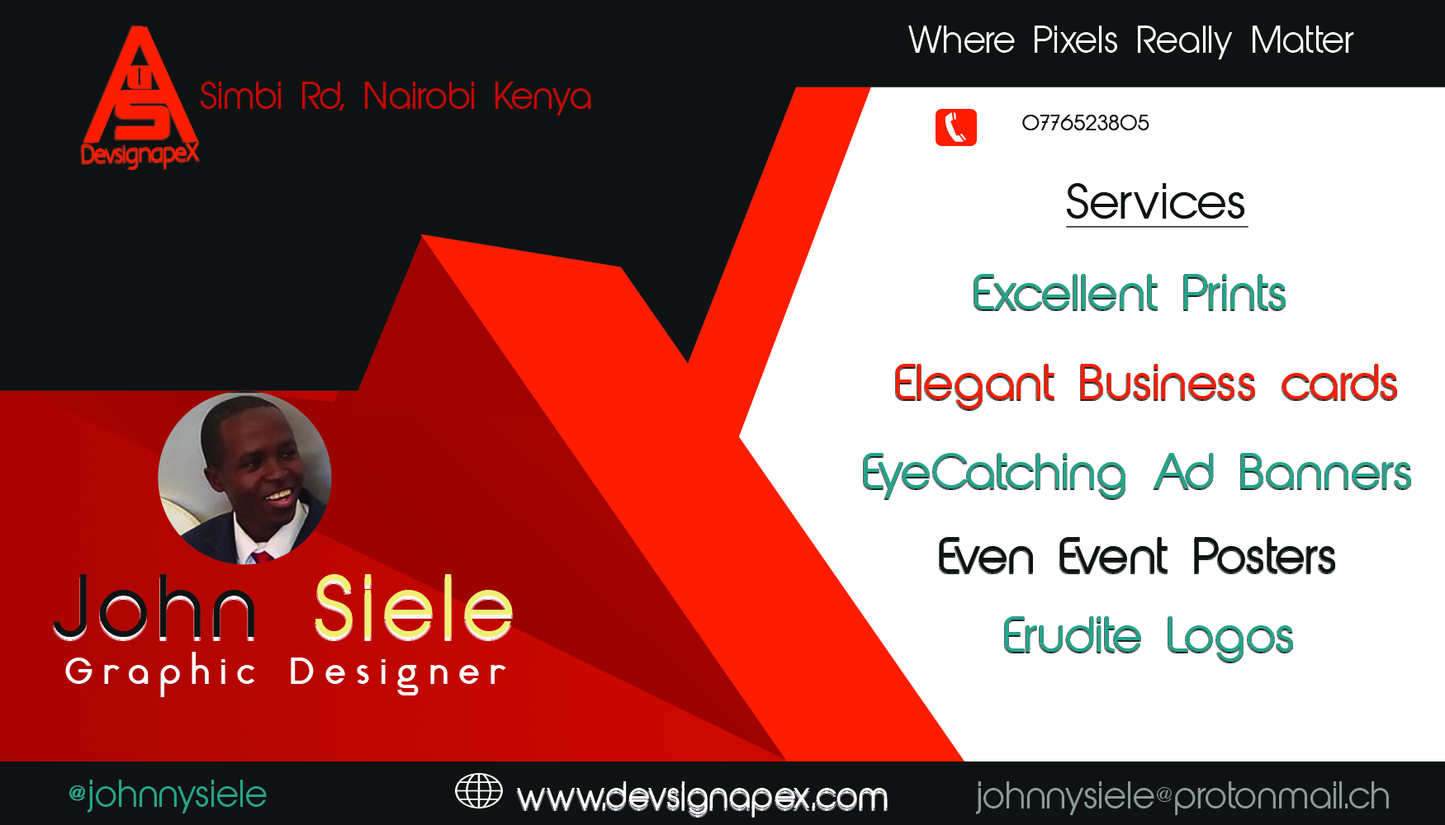
<style>
.page{position:relative;width:1445px;height:825px;background:#ffffff}
.page>*{position:absolute;margin:0}
.t1{font:34.4px "AbeatbyKai";letter-spacing:0.01em;color:#ffffff}
.t2{font:34.4px "AbeatbyKai";letter-spacing:0.01em;color:#c90400}
.t3{font:34.4px "AbeatbyKai";letter-spacing:0.01em;color:#0f1213}
.t4{font:45.9px "AbeatbyKai";letter-spacing:0.01em;color:#0f1213;text-decoration:underline}
.t5{font:45.9px "AbeatbyKai";letter-spacing:0.01em;color:#23a58a}
.t6{font:45.9px "AbeatbyKai";letter-spacing:0.01em;color:#ff1c00}
.t7{font:45.9px "AbeatbyKai";letter-spacing:0.01em;color:#0f1213}
.t8{font:80.3px "AbeatbyKai";letter-spacing:0.09em;color:#f1f073}
.t9{font:80.3px "AbeatbyKai";letter-spacing:0.09em;color:#0f1213}
.t10{font:62.8px "AquaGrotesque";letter-spacing:0.17em;color:#ffffff}
.t11{font:34.4px "AbeatbyKai";letter-spacing:0.01em;color:#23a58a}
.t12{font:34.4px "AbeatbyKai";letter-spacing:0.01em;color:#23a58a;text-transform:uppercase;font-weight:bold}
.t13{font:57.3px "AbeatbyKai";letter-spacing:0.01em;color:#ffffff}
.t14{font:34.4px "AbeatbyKai";letter-spacing:0.01em;color:#8a9a9a}
</style>
<div class="page">
<p class="t1" style="left:908px;top:26px;width:446px;height:33px">Where Pixels Really Matter</p>
<p class="t2" style="left:201px;top:82px;width:390px;height:34px">Simbi Rd, Nairobi Kenya</p>
<p class="t3" style="left:1022px;top:115px;width:127px;height:15px">0776523805</p>
<p class="t4" style="left:1066px;top:183px;width:182px;height:45px">Services</p>
<p class="t5" style="left:974px;top:274px;width:311px;height:36px">Excellent Prints</p>
<p class="t6" style="left:896px;top:364px;width:501px;height:45px">Elegant Business cards</p>
<p class="t5" style="left:863px;top:453px;width:548px;height:46px">EyeCatching Ad Banners</p>
<p class="t7" style="left:939px;top:537px;width:396px;height:36px">Even Event Posters</p>
<p class="t8" style="left:54px;top:575px;width:459px;height:62px"><span class="t9">John </span>Siele</p>
<p class="t5" style="left:1005px;top:617px;width:288px;height:45px">Erudite Logos</p>
<p class="t10" style="left:65px;top:652px;width:441px;height:46px">Graphic Designer</p>
<p class="t11" style="left:69px;top:780px;width:198px;height:34px"><span class="t12">@</span>johnnysiele</p>
<p class="t13" style="left:517px;top:782px;width:370px;height:33px">www.devsignapex.com</p>
<p class="t14" style="left:976px;top:782px;width:412px;height:34px">johnnysiele@protonmail.ch</p>
</div>
